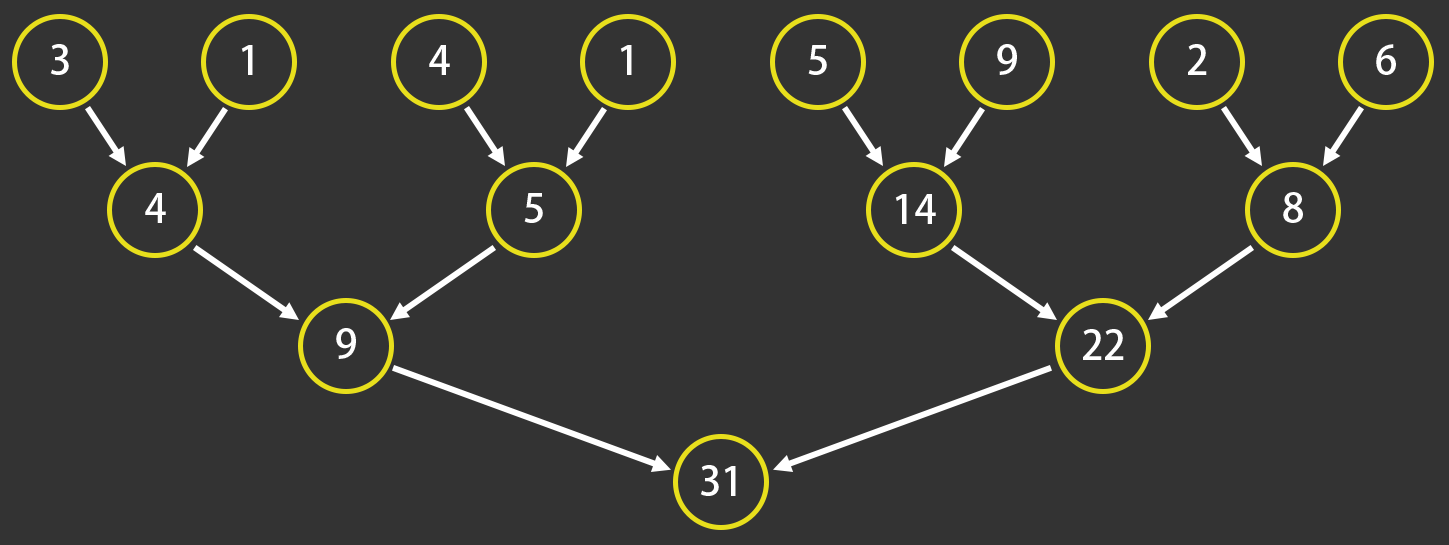
<style>
.page{position:relative;width:1449px;height:545px;background:#333333}
.page>*{position:absolute;margin:0}
.t1{font:39.9px "AdobeHeitiStd-Regular";color:#ffffff}
</style>
<div class="page">
<p class="t1" style="left:50px;top:44px;width:19px;height:31px">3</p>
<p class="t1" style="left:241px;top:45px;width:12px;height:30px">1</p>
<p class="t1" style="left:429px;top:45px;width:21px;height:30px">4</p>
<p class="t1" style="left:620px;top:45px;width:12px;height:30px">1</p>
<p class="t1" style="left:808px;top:45px;width:19px;height:30px">5</p>
<p class="t1" style="left:997px;top:44px;width:20px;height:31px">9</p>
<p class="t1" style="left:1188px;top:44px;width:19px;height:31px">2</p>
<p class="t1" style="left:1376px;top:44px;width:20px;height:31px">6</p>
<p class="t1" style="left:145px;top:193px;width:21px;height:30px">4</p>
<p class="t1" style="left:524px;top:193px;width:19px;height:30px">5</p>
<p class="t1" style="left:895px;top:194px;width:41px;height:30px">14</p>
<p class="t1" style="left:1283px;top:192px;width:20px;height:31px">8</p>
<p class="t1" style="left:336px;top:328px;width:20px;height:31px">9</p>
<p class="t1" style="left:1083px;top:329px;width:41px;height:31px">22</p>
<p class="t1" style="left:700px;top:465px;width:36px;height:31px">31</p>
</div>
